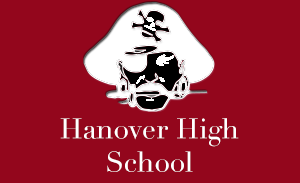
<style>
.page{position:relative;width:300px;height:183px;background:#93061c}
.page>*{position:absolute;margin:0}
.t1{font:27.7px "Didot";letter-spacing:0.01em;color:#ffffff}
</style>
<div class="page">
<p class="t1" style="left:60px;top:118px;width:179px;height:54px;text-align:center">Hanover High<br>School</p>
</div>
